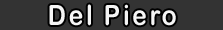
<style>
.page{position:relative;width:223px;height:30px;background:#333333}
.page>*{position:absolute;margin:0}
.t1{font:27.9px "ArialRoundedMTBold";letter-spacing:0.1em;color:#f5f5f5;scale:0.89 1}
</style>
<div class="page">
<p class="t1" style="left:49px;top:4px;width:127px;height:22px">Del Piero</p>
</div>
